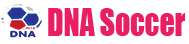
<style>
.page{position:relative;width:189px;height:44px;background:#ffffff}
.page>*{position:absolute;margin:0}
.t1{font:35.9px "Impact";color:#e91e63;scale:0.82 1}
</style>
<div class="page">
<p class="t1" style="left:48px;top:8px;width:137px;height:28px">DNA Soccer</p>
</div>
